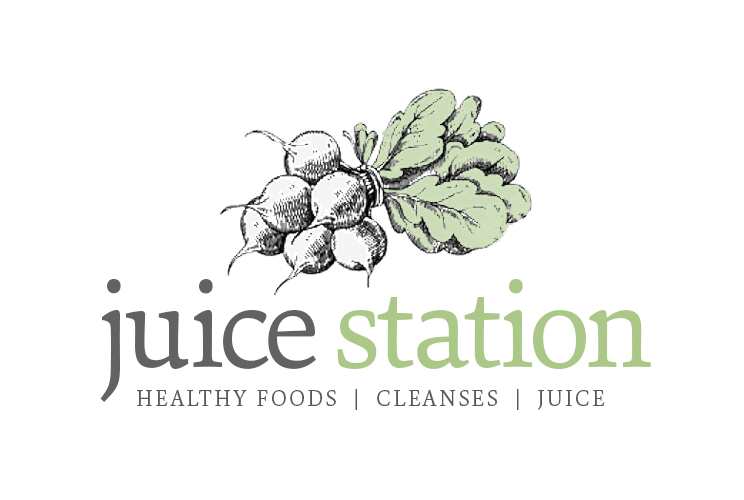
<style>
.page{position:relative;width:744px;height:500px;background:#ffffff}
.page>*{position:absolute;margin:0}
.t1{font:31.4px "SinaNova-Regular";letter-spacing:-0.05em;color:#abc888}
.t2{font:31.4px "SinaNova-Regular";letter-spacing:-0.05em;color:#626262}
.t3{font:5.7px "SinaNova-Regular";letter-spacing:0.1em;color:#575757;text-transform:uppercase}
</style>
<div class="page">
<p class="t1" style="left:100px;top:279px;width:551px;height:123px"><span class="t2">juice </span>station</p>
<p class="t3" style="left:137px;top:389px;width:468px;height:21px">healthy foods  |  cleanses  |  juice</p>
</div>
